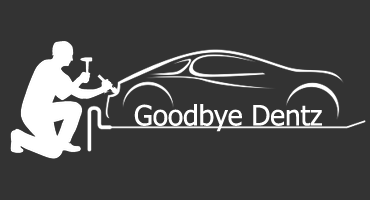
<style>
.page{position:relative;width:370px;height:200px;background:#333333}
.page>*{position:absolute;margin:0}
.t1{font:28px "Tahoma";color:#ffffff}
</style>
<div class="page">
<p class="t1" style="left:134px;top:104px;width:188px;height:28px">Goodbye Dentz</p>
</div>
